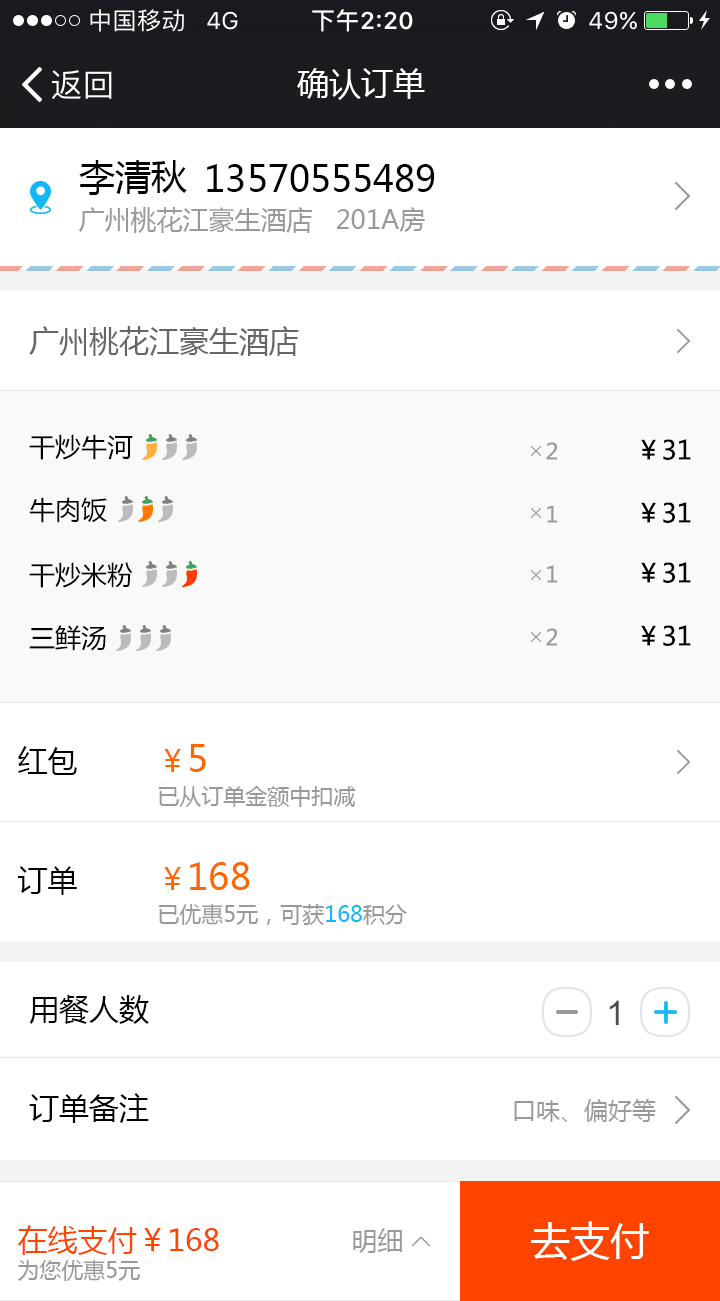
<style>
.page{position:relative;width:720px;height:1301px;background:#ffffff}
.page>*{position:absolute;margin:0}
.t1{font:32px "MicrosoftYaHei";color:#ffffff}
.t2{font:36px "MicrosoftYaHei";color:#000000}
.t3{font:26px "MicrosoftYaHei";color:#999999}
.t4{font:30px "MicrosoftYaHei";color:#666666}
.t5{font:26px "MicrosoftYaHei";color:#000000}
.t6{font:22px "MicrosoftYaHei";color:#999999}
.t7{font:30px "MicrosoftYaHei";color:#000000}
.t8{font:22px/44px "MicrosoftYaHei";color:#999999}
.t9{font:30px/44px "MicrosoftYaHei";color:#ff6600}
.t10{font:36px/44px "MicrosoftYaHei";color:#ff6600}
.t11{font:22px/44px "MicrosoftYaHei";color:#12b7f5}
.t12{font:34px "ArialMT";color:#4d4d4d}
.t13{font:24px "MicrosoftYaHei";color:#999999}
.t14{font:30px/34px "MicrosoftYaHei";color:#ff4400}
.t15{font:22px/34px "MicrosoftYaHei";color:#999999}
.t16{font:40px "MicrosoftYaHei";color:#ffffff}
</style>
<div class="page">
<p class="t1" style="left:297px;top:68px;width:128px;height:32px">确认订单</p>
<p class="t2" style="left:79px;top:160px;width:108px;height:35px">李清秋</p>
<p class="t2" style="left:207px;top:164px;width:228px;height:28px">13570555489</p>
<p class="t3" style="left:78px;top:207px;width:347px;height:26px">广州桃花江豪生酒店   201A房</p>
<p class="t4" style="left:29px;top:326px;width:270px;height:30px">广州桃花江豪生酒店</p>
<p class="t5" style="left:29px;top:434px;width:104px;height:26px">干炒牛河</p>
<p class="t6" style="left:546px;top:442px;width:11px;height:18px">2</p>
<p class="t5" style="left:641px;top:439px;width:50px;height:21px">￥31</p>
<p class="t5" style="left:29px;top:497px;width:78px;height:26px">牛肉饭</p>
<p class="t6" style="left:547px;top:505px;width:11px;height:18px">1</p>
<p class="t5" style="left:641px;top:502px;width:50px;height:21px">￥31</p>
<p class="t5" style="left:29px;top:562px;width:104px;height:26px">干炒米粉</p>
<p class="t6" style="left:547px;top:565px;width:11px;height:18px">1</p>
<p class="t5" style="left:641px;top:562px;width:50px;height:21px">￥31</p>
<p class="t5" style="left:29px;top:625px;width:77px;height:26px">三鲜汤</p>
<p class="t6" style="left:546px;top:628px;width:11px;height:18px">2</p>
<p class="t5" style="left:641px;top:625px;width:50px;height:21px">￥31</p>
<p class="t7" style="left:18px;top:746px;width:59px;height:29px">红包</p>
<p class="t8" style="left:158px;top:744px;width:198px;height:63px"><span class="t9">￥</span><span class="t10">5<br></span>已从订单金额中扣减</p>
<p class="t7" style="left:18px;top:866px;width:59px;height:29px">订单</p>
<p class="t8" style="left:158px;top:862px;width:249px;height:63px"><span class="t9">￥</span><span class="t10">168<br></span>已优惠5元，可获<span class="t11">168</span>积分</p>
<p class="t7" style="left:29px;top:995px;width:120px;height:29px">用餐人数</p>
<p class="t12" style="left:609px;top:1000px;width:10px;height:25px">1</p>
<p class="t7" style="left:29px;top:1093px;width:120px;height:30px">订单备注</p>
<p class="t13" style="left:514px;top:1099px;width:142px;height:23px">口味、偏好等</p>
<p class="t14" style="left:17px;top:1225px;width:202px;height:56px">在线支付￥168<br><span class="t15">为您优惠5元</span></p>
<p class="t3" style="left:353px;top:1228px;width:49px;height:25px">明细</p>
<p class="t16" style="left:531px;top:1221px;width:118px;height:40px">去支付</p>
</div>
